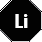
<style>
.page{position:relative;width:42px;height:42px;background:#020202}
.page>*{position:absolute;margin:0}
.t1{font:20px "AbadiMT-CondensedExtraBold";color:#ffffff}
</style>
<div class="page">
<p class="t1" style="left:15px;top:14px;width:13px;height:14px">Li</p>
</div>
